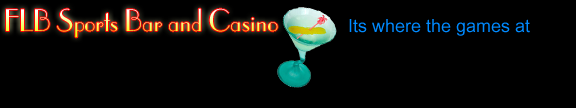
<style>
.page{position:relative;width:576px;height:108px;background:#000000}
.page>*{position:absolute;margin:0}
.t1{font:30px "Parisian"}
.t2{font:18px "ArialMT";color:#008aff}
</style>
<div class="page">
<p class="t1" style="left:6px;top:8px;width:272px;height:30px">FLB Sports Bar and Casino</p>
<p class="t2" style="left:349px;top:19px;width:181px;height:17px">Its where the games at</p>
</div>
